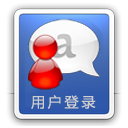
<style>
.page{position:relative;width:128px;height:128px}
.page>*{position:absolute;margin:0}
.t1{font:14px "MicrosoftYaHei";letter-spacing:0.2em;color:#cdcdcd}
</style>
<div class="page">
<p class="t1" style="left:31px;top:95px;width:65px;height:14px">用户登录</p>
</div>
